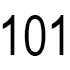
<style>
.page{position:relative;width:70px;height:70px;background:#ffffff}
.page>*{position:absolute;margin:0}
.t1{font:53.8px "ArialNarrow";color:#000000}
</style>
<div class="page">
<p class="t1" style="left:2px;top:15px;width:62px;height:41px">101</p>
</div>
